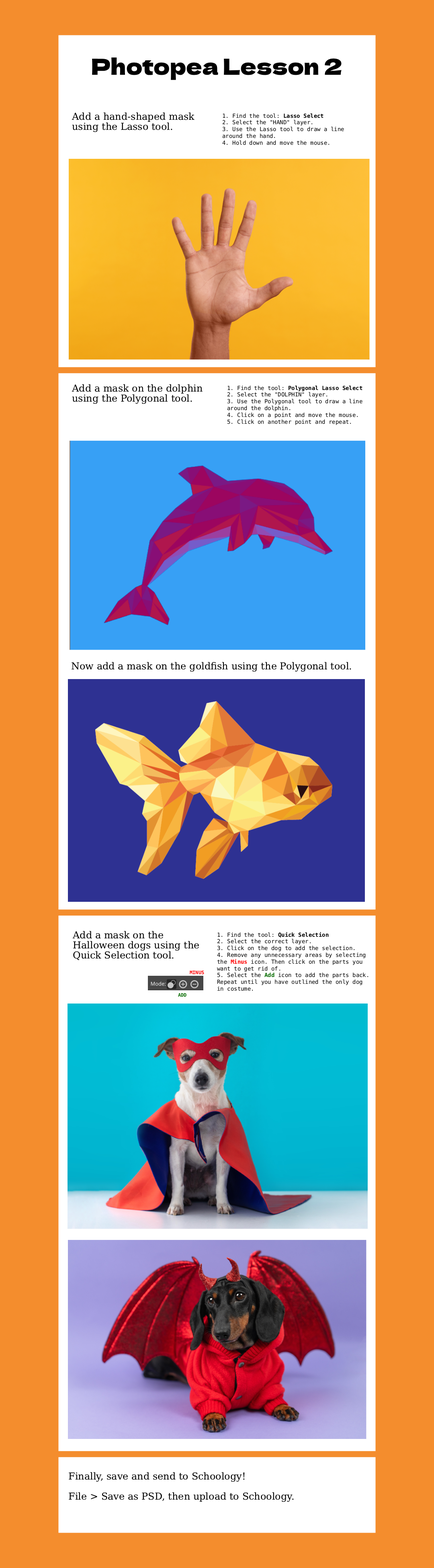
<style>
.page{position:relative;width:434px;height:1568px;background:#f48d2d}
.page>*{position:absolute;margin:0}
.t1{font:22.1px "DelaGothicOne-Regular";color:#000000}
.t2{font:9.6px/10.1px "DejaVuSerif";color:#000000}
.t3{font:5.6px "DejaVuSansMono";color:#000000}
.t4{font:5.6px "DejaVuSansMono-Bold";color:#000000}
.t5{font:9.6px "DejaVuSerif";color:#000000}
.t6{font:5.6px "DejaVuSansMono-Bold";color:#ff0000}
.t7{font:5.6px "DejaVuSansMono-Bold";color:#066b00}
.t8{font:4.8px "DejaVuSansMono-Bold";color:#ff0000}
.t9{font:4.8px "DejaVuSansMono-Bold";color:#066b00}
</style>
<div class="page">
<p class="t1" style="left:92px;top:57px;width:250px;height:23px">Photopea Lesson 2</p>
<p class="t2" style="left:72px;top:112px;width:123px;height:20px">Add a hand-shaped mask using the Lasso tool.</p>
<p class="t3" style="left:222px;top:113px;width:122px;height:32px">1. Find the tool: <span class="t4">Lasso Select<br></span>2. Select the "HAND" layer.<br>3. Use the Lasso tool to draw a line around the hand.<br>4. Hold down and move the mouse.</p>
<p class="t2" style="left:72px;top:384px;width:131px;height:20px">Add a mask on the dolphin using the Polygonal tool.</p>
<p class="t3" style="left:227px;top:386px;width:136px;height:39px">1. Find the tool: <span class="t4">Polygonal Lasso Select<br></span>2. Select the "DOLPHIN" layer.<br>3. Use the Polygonal tool to draw a line around the dolphin.<br>4. Click on a point and move the mouse.<br>5. Click on another point and repeat.</p>
<p class="t5" style="left:72px;top:662px;width:279px;height:10px">Now add a mask on the goldfish using the Polygonal tool.</p>
<p class="t2" style="left:72px;top:931px;width:127px;height:29px">Add a mask on the Halloween dogs using the Quick Selection tool.</p>
<p class="t3" style="left:217px;top:932px;width:152px;height:59px">1. Find the tool: <span class="t4">Quick Selection<br></span>2. Select the correct layer.<br>3. Click on the dog to add the selection.<br>4. Remove any unnecessary areas by selecting the <span class="t6">Minus </span>icon. Then click on the parts you want to get rid of.<br>5. Select the <span class="t7">Add </span>icon to add the parts back. Repeat until you have outlined the only dog in costume.</p>
<p class="t8" style="left:190px;top:971px;width:14px;height:4px">MINUS</p>
<p class="t9" style="left:178px;top:993px;width:9px;height:4px">ADD</p>
<p class="t2" style="left:69px;top:1472px;width:225px;height:30px">Finally, save and send to Schoology! <br><br>File &gt; Save as PSD, then upload to Schoology.</p>
</div>
